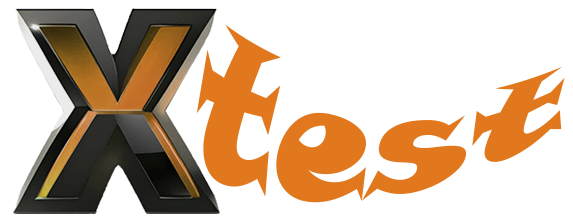
<style>
.page{position:relative;width:573px;height:222px;background:#ffffff}
.page>*{position:absolute;margin:0}
.t1{font:153.4px "SnapITC-Regular";color:#e1781d}
</style>
<div class="page">
<p class="t1" style="left:196px;top:24px;width:369px;height:179px">test</p>
</div>
